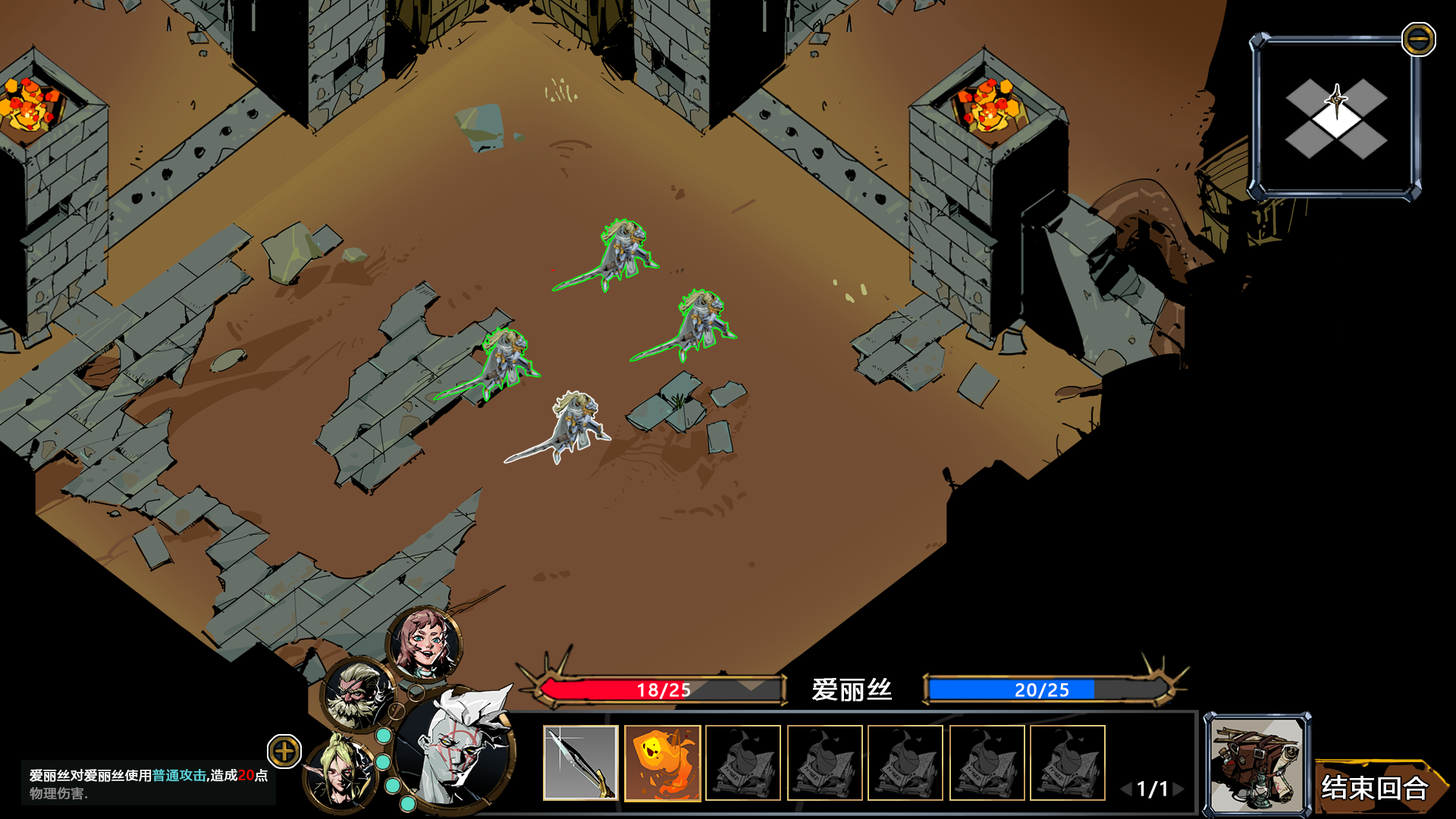
<style>
.page{position:relative;width:1456px;height:819px;background:#000000}
.page>*{position:absolute;margin:0}
.t1{font:25.3px "MicrosoftYaHei";letter-spacing:0.05em;color:#fefefe;font-weight:bold}
.t2{font:17.8px "MicrosoftYaHei";letter-spacing:0.05em;color:#fefefe;font-weight:bold}
.t3{font:12.6px "MicrosoftYaHei";letter-spacing:0.05em;color:#ffffff;font-weight:bold}
.t4{font:12.6px "MicrosoftYaHei";letter-spacing:0.05em;color:#5ed4db;font-weight:bold}
.t5{font:12.6px "MicrosoftYaHei";letter-spacing:0.05em;color:#ff0000;font-weight:bold}
.t6{font:19px "MicrosoftYaHei";letter-spacing:0.05em;color:#ffffff;font-weight:bold}
.t7{font:12.6px "MicrosoftYaHei";letter-spacing:0.05em;color:#908f8f;font-weight:bold}
</style>
<div class="page">
<p class="t1" style="left:812px;top:678px;width:80px;height:23px">爱丽丝</p>
<p class="t2" style="left:638px;top:683px;width:52px;height:16px">18/25</p>
<p class="t2" style="left:1015px;top:683px;width:53px;height:16px">20/25</p>
<p class="t3" style="left:30px;top:769px;width:238px;height:13px">爱丽丝对爱丽丝使用<span class="t4">普通攻击</span>,造成<span class="t5">20</span>点</p>
<p class="t6" style="left:1137px;top:781px;width:29px;height:18px">1/1</p>
<p class="t1" style="left:1322px;top:775px;width:107px;height:25px">结束回合</p>
<p class="t7" style="left:30px;top:787px;width:57px;height:13px">物理伤害.</p>
</div>
